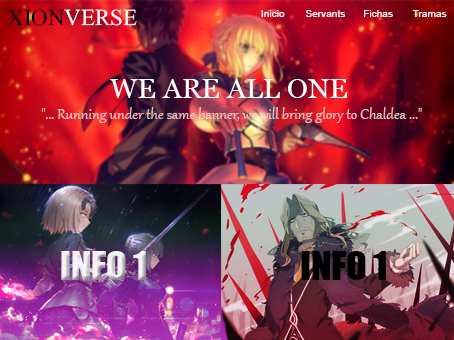
<style>
.page{position:relative;width:454px;height:340px}
.page>*{position:absolute;margin:0}
.t1{font:34.3px "MicrosoftHimalaya";color:#ffffff}
.t2{font:34.3px "MicrosoftHimalaya";color:#000000}
.t3{font:10.1px "ArialMT";color:#ffffff}
.t4{font:27.4px "Georgia";color:#ffffff;scale:1.03 1}
.t5{font:18px "Gabriola";color:#ecc0c1}
.t6{font:37.4px "Impact"}
.t7{font:24.9px "MicrosoftHimalaya"}
.t8{font:37.4px "Impact";color:#000000}
.t9{font:24.9px "MicrosoftHimalaya";color:#000000}
</style>
<div class="page">
<p class="t1" style="left:7px;top:9px;width:130px;height:17px"><span class="t2">XION</span>VERSE</p>
<p class="t3" style="left:261px;top:10px;width:186px;height:7px">Inicio      Servants     Fichas Tramas</p>
<p class="t4" style="left:110px;top:79px;width:238px;height:19px">WE ARE ALL ONE</p>
<p class="t5" style="left:42px;top:107px;width:380px;height:16px">"... Running under the same banner, we will bring glory to Chaldea ..."</p>
<p class="t6" style="left:61px;top:251px;width:85px;height:29px"><span class="t7"><br></span>INFO 1</p>
<p class="t8" style="left:301px;top:251px;width:85px;height:29px"><span class="t9"><br></span>INFO 1</p>
</div>
